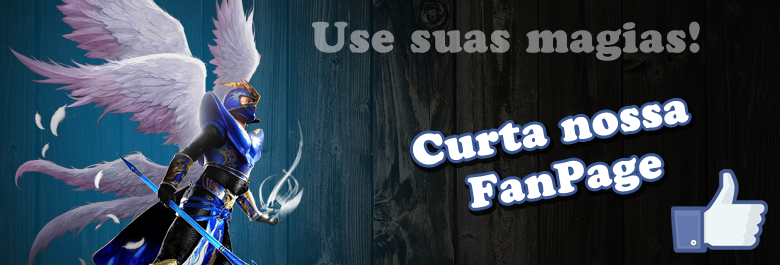
<style>
.page{position:relative;width:780px;height:265px}
.page>*{position:absolute;margin:0}
.t1{font:42px "CooperBlackStd";color:#7b7b7a;font-weight:bold}
.t2{font:42px "CooperBlackStd";color:#ffffff;font-weight:bold}
</style>
<div class="page">
<p class="t1" style="left:312px;top:21px;width:388px;height:40px">Use suas magias!</p>
<p class="t2" style="left:413px;top:101px;width:276px;height:107px;text-align:center;rotate:-9deg">Curta nossa <br>FanPage</p>
</div>
